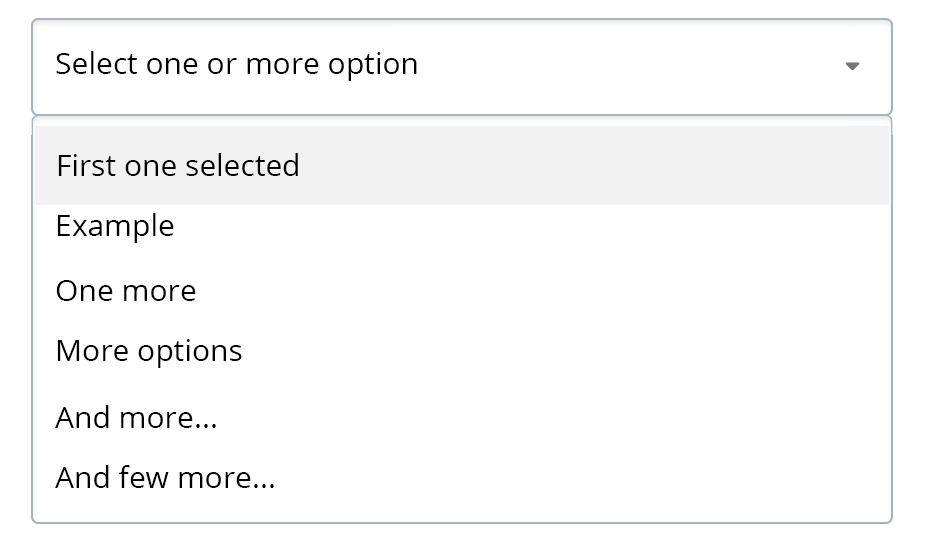
<style>
.page{position:relative;width:946px;height:553px;background:#ffffff}
.page>*{position:absolute;margin:0}
.t1{font:30px "OpenSans";color:#000000}
</style>
<div class="page">
<p class="t1" style="left:56px;top:51px;width:361px;height:30px">Select one or more option</p>
<p class="t1" style="left:58px;top:153px;width:240px;height:23px">First one selected</p>
<p class="t1" style="left:57px;top:213px;width:117px;height:30px">Example</p>
<p class="t1" style="left:56px;top:280px;width:140px;height:21px">One more</p>
<p class="t1" style="left:57px;top:339px;width:185px;height:29px">More options</p>
<p class="t1" style="left:55px;top:405px;width:161px;height:23px">And more...</p>
<p class="t1" style="left:55px;top:465px;width:219px;height:23px">And few more...</p>
</div>
